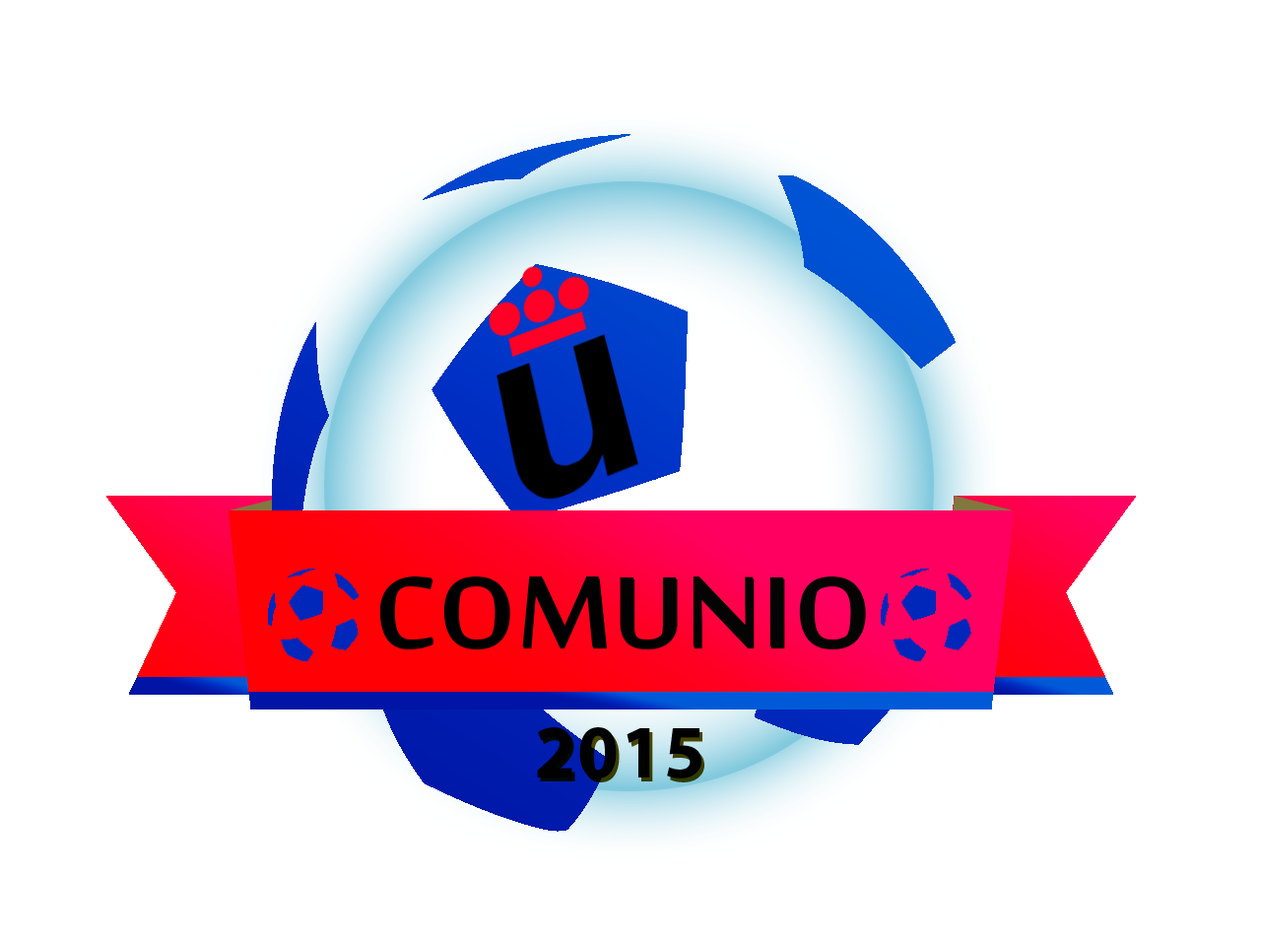
<style>
.page{position:relative;width:1261px;height:946px;background:#ffffff}
.page>*{position:absolute;margin:0}
.t1{font:153.3px "MoolBoran";letter-spacing:0.015em;color:#010101}
.t2{font:75.4px "MyriadPro-Bold";letter-spacing:0.025em;color:#010101;text-transform:uppercase}
</style>
<div class="page">
<p class="t1" style="left:379px;top:576px;width:486px;height:71px">COMUNIO</p>
<p class="t2" style="left:537px;top:727px;width:164px;height:51px">2015</p>
</div>
